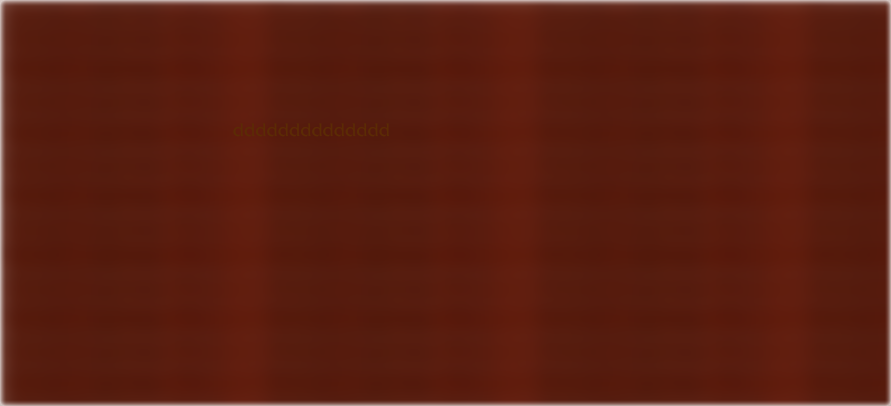
<style>
.page{position:relative;width:891px;height:406px}
.page>*{position:absolute;margin:0}
.t1{font:18px "2002L";color:#5b2b04}
</style>
<div class="page">
<p class="t1" style="left:233px;top:123px;width:157px;height:14px">dddddddddddddd</p>
</div>
